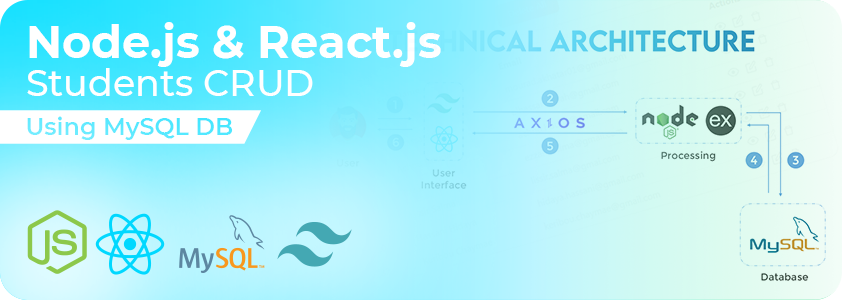
<style>
.page{position:relative;width:842px;height:300px}
.page>*{position:absolute;margin:0}
.t1{font:44.7px/38.6px "Montserrat-Bold";color:#ffffff}
.t2{font:36.4px/38.6px "Montserrat-Medium";color:#ffffff}
.t3{font:23.8px/38.6px "Montserrat-SemiBold";color:#03deff}
</style>
<div class="page">
<p class="t1" style="left:27px;top:22px;width:414px;height:118px;text-align:right">Node.js &amp; React.js<br><span class="t2">Students CRUD<br></span><span class="t3">Using MySQL DB</span></p>
</div>
